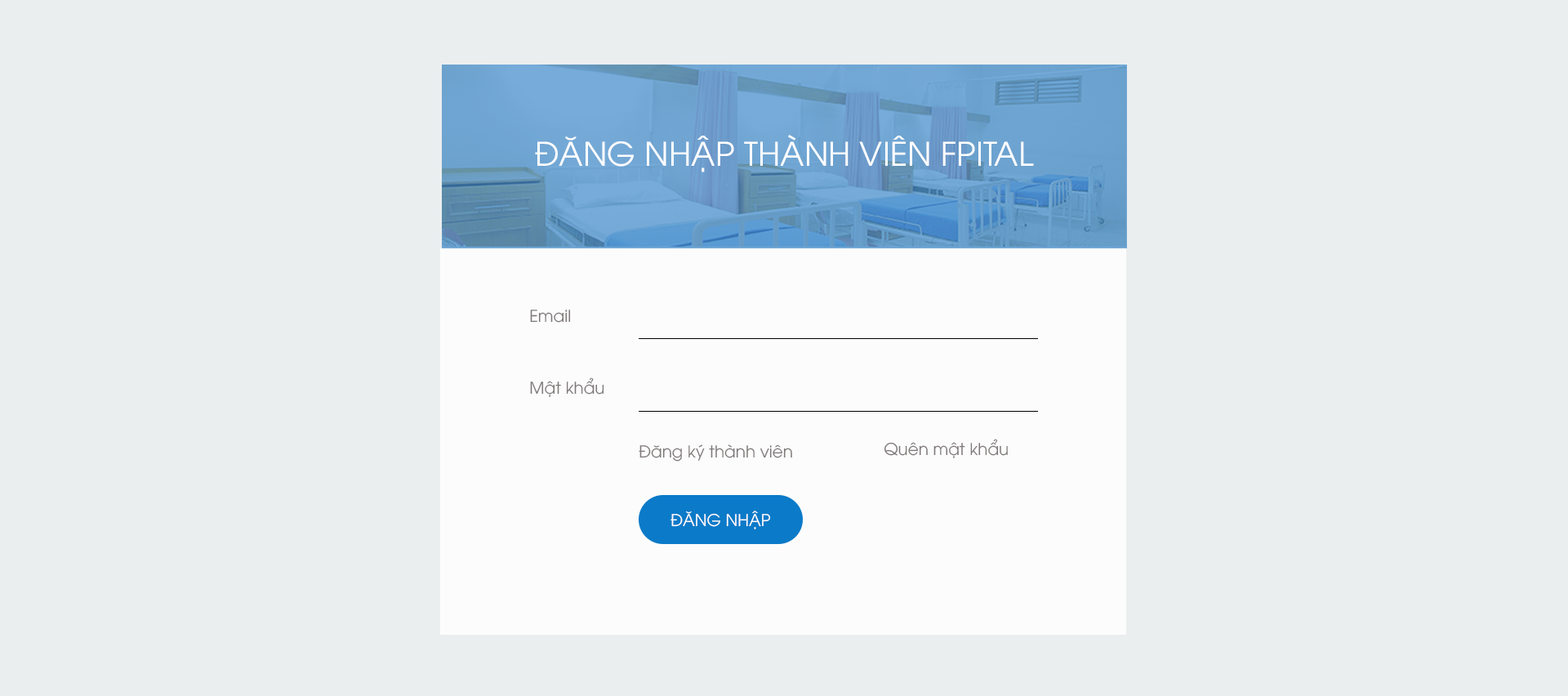
<style>
.page{position:relative;width:1568px;height:696px;background:#ebeeef}
.page>*{position:absolute;margin:0}
.t1{font:32.7px "UTM-Avo";color:#fefefe}
.t2{font:16.3px "UTM-Avo";color:#7f7979}
.t3{font:16.3px "UTM-Avo";color:#ffffff}
</style>
<div class="page">
<p class="t1" style="left:535px;top:135px;width:499px;height:37px">ĐĂNG NHẬP THÀNH VIÊN FPITAL</p>
<p class="t2" style="left:530px;top:310px;width:41px;height:13px">Email</p>
<p class="t2" style="left:530px;top:377px;width:74px;height:20px">Mật khẩu</p>
<p class="t2" style="left:639px;top:444px;width:153px;height:17px">Đăng ký thành viên</p>
<p class="t2" style="left:884px;top:439px;width:124px;height:19px">Quên mật khẩu</p>
<p class="t3" style="left:670px;top:510px;width:101px;height:19px">ĐĂNG NHẬP</p>
</div>
